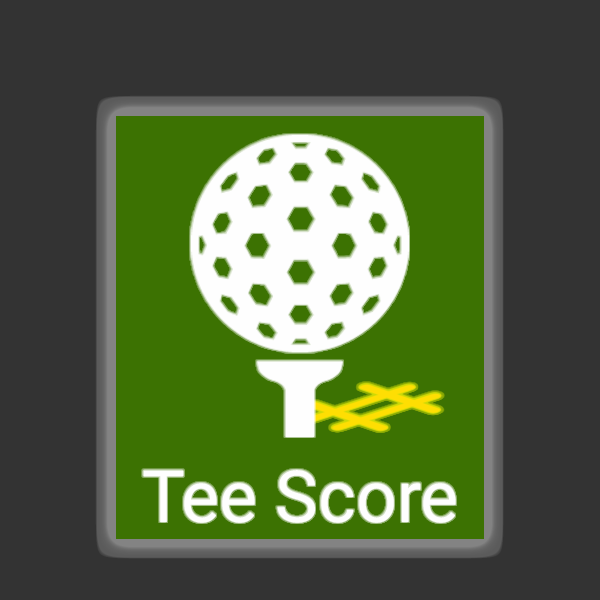
<style>
.page{position:relative;width:600px;height:600px;background:#333333}
.page>*{position:absolute;margin:0}
.t1{font:72px "Roboto-Regular";color:#fdfcfc}
</style>
<div class="page">
<p class="t1" style="left:143px;top:470px;width:313px;height:53px">Tee Score</p>
</div>
